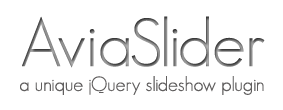
<style>
.page{position:relative;width:283px;height:110px;background:#ffffff}
.page>*{position:absolute;margin:0}
.t1{font:66.9px "GeosansLight"}
.t2{font:19.9px "GeosansLight";color:#615f5f}
</style>
<div class="page">
<p class="t1" style="left:22px;top:16px;width:243px;height:52px">AviaSlider</p>
<p class="t2" style="left:20px;top:76px;width:244px;height:19px">a unique jQuery slideshow plugin</p>
</div>
